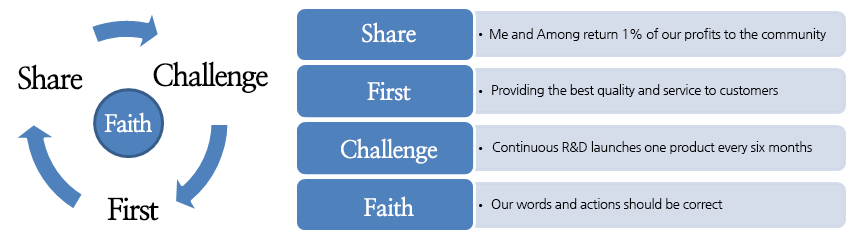
<style>
.page{position:relative;width:846px;height:244px;background:#ffffff}
.page>*{position:absolute;margin:0}
.t1{font:24px/58px "NanumMyeongjoBold";letter-spacing:-0.025em;color:#ffffff}
.t2{font:13px "NanumGothic";letter-spacing:-0.025em;color:#000000}
.t3{font:30px "NanumMyeongjoBold";letter-spacing:-0.05em;color:#000000}
.t4{font:24px "NanumMyeongjoBold";letter-spacing:-0.05em;color:#ffffff}
</style>
<div class="page">
<p class="t1" style="left:341px;top:22px;width:97px;height:195px;text-align:center">Share<br>First<br>Challenge<br>Faith</p>
<p class="t2" style="left:490px;top:28px;width:336px;height:13px">Me and Among return 1% of our profits to the community</p>
<p class="t3" style="left:18px;top:64px;width:65px;height:26px">Share</p>
<p class="t3" style="left:153px;top:61px;width:115px;height:32px">Challenge</p>
<p class="t2" style="left:492px;top:84px;width:286px;height:13px">Providing the best quality and service to customers</p>
<p class="t4" style="left:104px;top:112px;width:48px;height:21px">Faith</p>
<p class="t2" style="left:492px;top:141px;width:320px;height:13px">Continuous R&amp;D launches one product every six months</p>
<p class="t3" style="left:107px;top:197px;width:52px;height:24px">First</p>
<p class="t2" style="left:491px;top:198px;width:232px;height:11px">Our words and actions should be correct</p>
</div>
